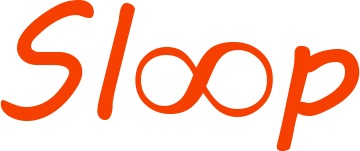
<style>
.page{position:relative;width:360px;height:151px;background:#ffffff}
.page>*{position:absolute;margin:0}
.t1{font:152.8px "MVBoli";color:#f54102}
.t2{font:183.3px "TimesNewRomanPSMT";color:#f54102;scale:1.14 1}
</style>
<div class="page">
<p class="t1" style="left:0px;top:0px;width:360px;height:151px">Sl  p</p>
<p class="t2" style="left:135px;top:42px;width:138px;height:75px">∞</p>
</div>
